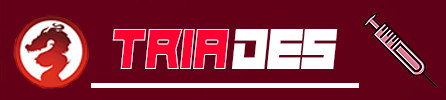
<style>
.page{position:relative;width:446px;height:100px}
.page>*{position:absolute;margin:0}
.t1{font:58.3px "Hindsight2020";color:#ff0030;scale:0.94 1}
.t2{font:58.3px "Hindsight2020";color:#ffffff;scale:0.94 1}
</style>
<div class="page">
<p class="t1" style="left:112px;top:29px;width:118px;height:40px">tria</p>
<p class="t2" style="left:232px;top:29px;width:106px;height:40px">des</p>
</div>
